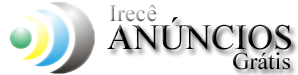
<style>
.page{position:relative;width:298px;height:75px;background:#ffffff}
.page>*{position:absolute;margin:0}
.t1{font:24px "TimesNewRomanPSMT";color:#9a9a9a}
.t2{font:36px "TimesNewRomanPSMT";color:#000000}
.t3{font:24px "TimesNewRomanPSMT";color:#000000}
</style>
<div class="page">
<p class="t1" style="left:109px;top:4px;width:48px;height:18px">Irecê</p>
<p class="t2" style="left:107px;top:17px;width:184px;height:33px">ANÚNCIOS</p>
<p class="t3" style="left:233px;top:52px;width:57px;height:18px">Grátis</p>
</div>
